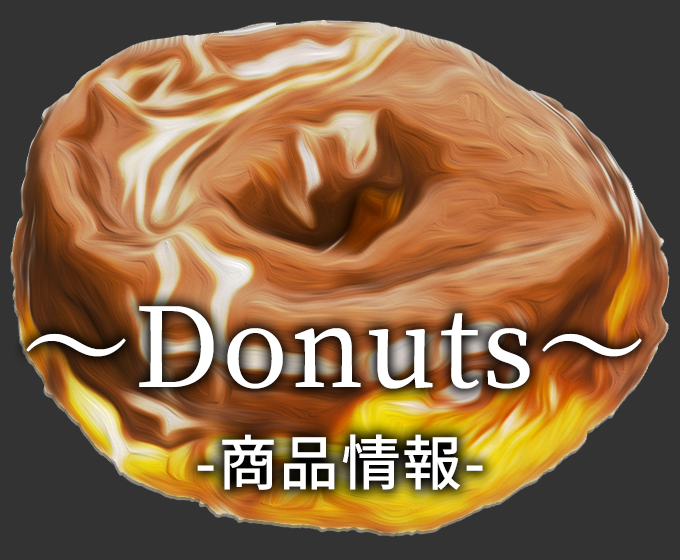
<style>
.page{position:relative;width:680px;height:560px;background:#333333}
.page>*{position:absolute;margin:0}
.t1{font:110px "NotoSerifJP-Medium";letter-spacing:0.025em;color:#ffffff}
.t2{font:60px "NotoSansJP-Medium";letter-spacing:0.025em;color:#ffffff}
</style>
<div class="page">
<p class="t1" style="left:26px;top:306px;width:616px;height:83px">〜Donuts〜</p>
<p class="t2" style="left:197px;top:434px;width:286px;height:56px">-商品情報-</p>
</div>
